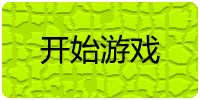
<style>
.page{position:relative;width:200px;height:100px;background:#bbf500}
.page>*{position:absolute;margin:0}
.t1{font:30px "MicrosoftYaHei";color:#000000}
</style>
<div class="page">
<p class="t1" style="left:40px;top:34px;width:120px;height:31px">开始游戏</p>
</div>
